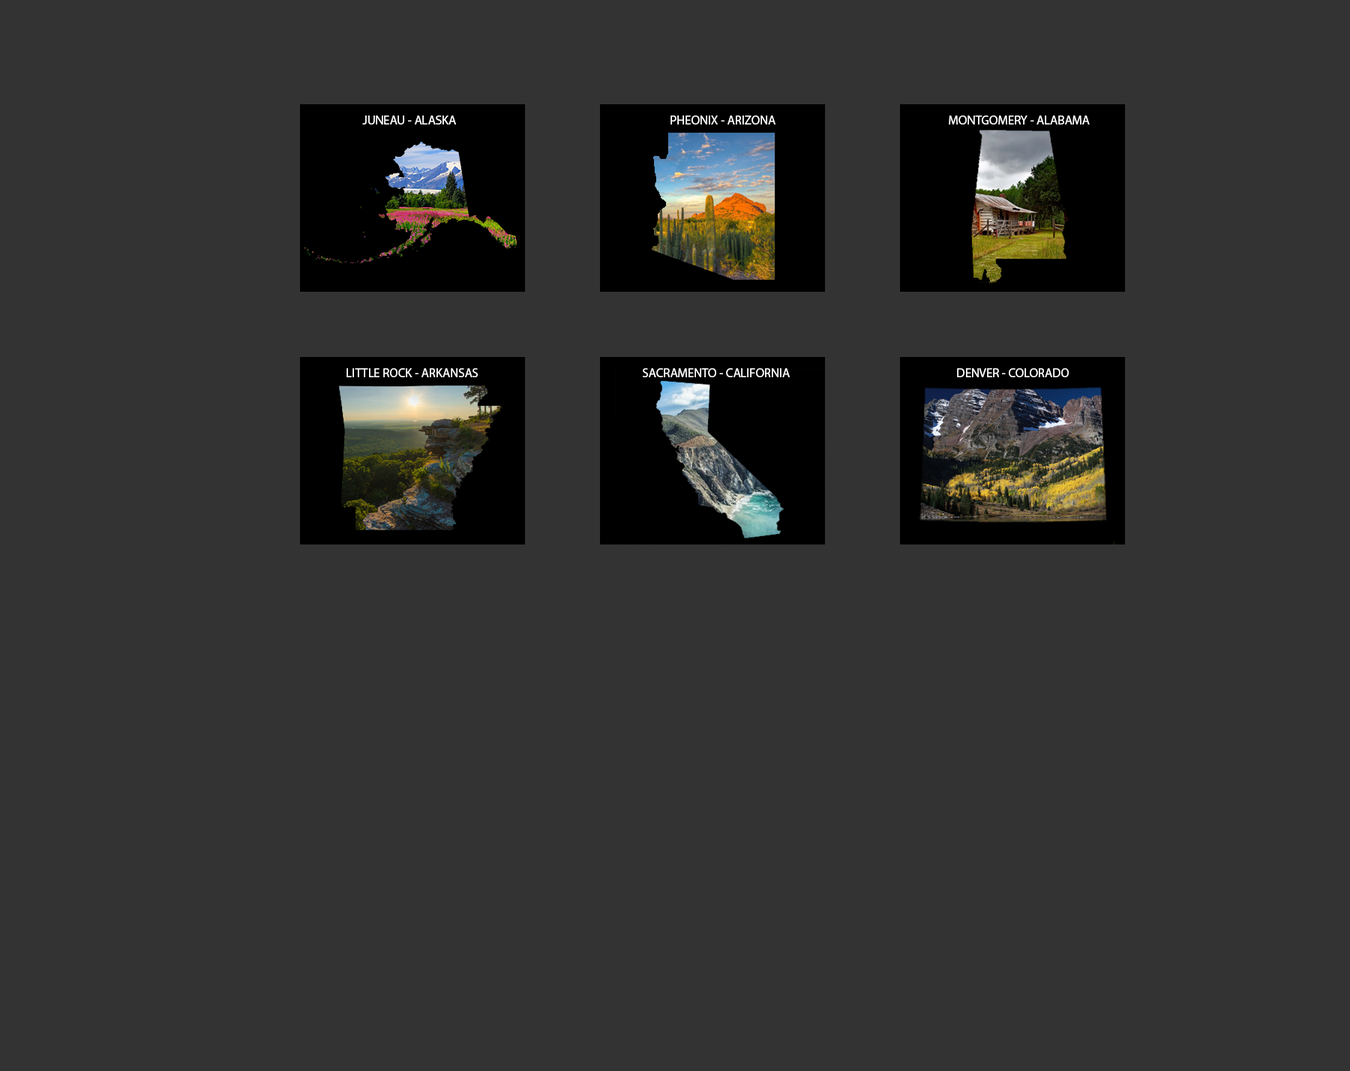
<style>
.page{position:relative;width:1350px;height:1071px;background:#333333}
.page>*{position:absolute;margin:0}
.t1{font:9px "MyriadPro-Regular";color:#ffffff}
</style>
<div class="page">
<p class="t1" style="left:362px;top:116px;width:94px;height:8px">JUNEAU - ALASKA</p>
<p class="t1" style="left:670px;top:116px;width:106px;height:8px">PHEONIX - ARIZONA</p>
<p class="t1" style="left:949px;top:116px;width:141px;height:8px">MONTGOMERY - ALABAMA</p>
<p class="t1" style="left:346px;top:368px;width:132px;height:9px">LITTLE ROCK - ARKANSAS</p>
<p class="t1" style="left:643px;top:368px;width:147px;height:9px">SACRAMENTO - CALIFORNIA</p>
<p class="t1" style="left:957px;top:368px;width:112px;height:9px">DENVER - COLORADO</p>
</div>
